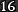
<style>
.page{position:relative;width:18px;height:12px;background:#333333}
.page>*{position:absolute;margin:0}
.t1{font:17px "Perpetua-Bold";color:#ffffff}
</style>
<div class="page">
<p class="t1" style="left:1px;top:1px;width:14px;height:10px">16</p>
</div>
